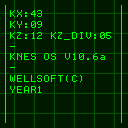
<style>
.page{position:relative;width:128px;height:128px;background:#001a00}
.page>*{position:absolute;margin:0}
.t1{font:9px "Terminal";letter-spacing:0.1em;color:#00ff00}
</style>
<div class="page">
<p class="t1" style="left:10px;top:10px;width:101px;height:83px">KX:43<br>KY:09<br>KZ:12 KZ_DIV:05<br>-<br>KNES OS V10.6a<br>-<br>WELLSOFT(C) <br>YEAR1</p>
</div>
